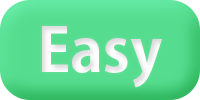
<style>
.page{position:relative;width:200px;height:100px;background:#55dc8e}
.page>*{position:absolute;margin:0}
.t1{font:60px "AdobeGothicStd-Bold";color:#ffffff}
</style>
<div class="page">
<p class="t1" style="left:42px;top:26px;width:120px;height:62px">Easy</p>
</div>
